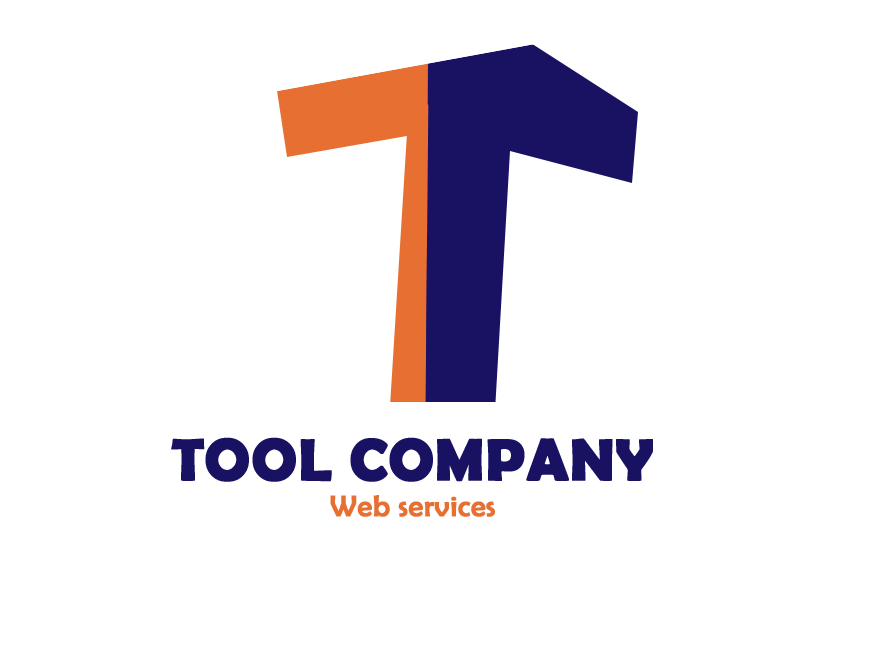
<style>
.page{position:relative;width:875px;height:652px;background:#ffffff}
.page>*{position:absolute;margin:0}
.t1{font:60px "BerlinSansFBDemi-Bold";color:#191262;font-weight:bold}
.t2{font:30px "BerlinSansFB-Reg";color:#e76f32;font-weight:bold}
</style>
<div class="page">
<p class="t1" style="left:171px;top:437px;width:482px;height:80px;text-align:center">TOOL COMPANY<br><span class="t2">Web services</span></p>
</div>
